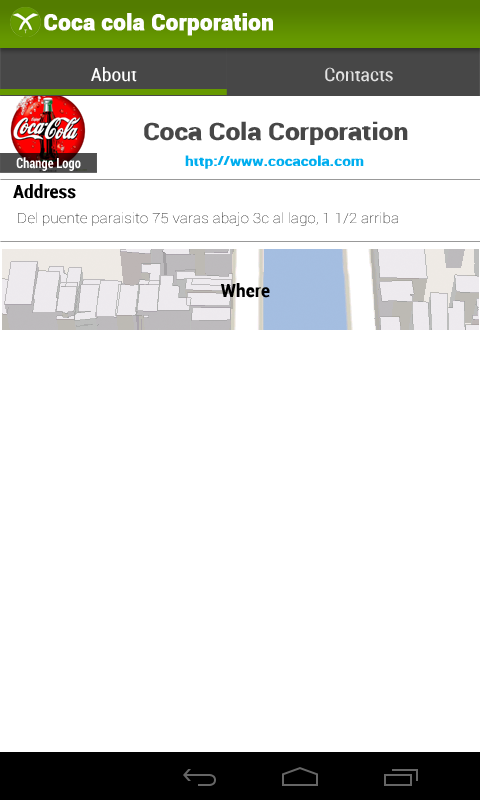
<style>
.page{position:relative;width:480px;height:800px;background:#ffffff}
.page>*{position:absolute;margin:0}
.t1{font:22px "Roboto-Black";color:#fefefe;font-weight:bold}
.t2{font:18px "Roboto-Condensed";color:#ffffff;scale:1.1 1}
.t3{font:18px "Roboto-Condensed";color:#e1e1e1;scale:1.1 1}
.t4{font:24px "Roboto-Black";color:#474747;scale:1.1 1}
.t5{font:14px "Roboto-BoldCondensed";color:#ffffff;scale:0.9 1}
.t6{font:14px "Roboto-Black";color:#00aeef;scale:1.1 1}
.t7{font:18px "Roboto-BoldCondensed";color:#000000;scale:1.1 1}
.t8{font:14px "Roboto-Thin";scale:1.1 1}
</style>
<div class="page">
<p class="t1" style="left:44px;top:13px;width:229px;height:23px">Coca cola Corporation</p>
<p class="t2" style="left:91px;top:67px;width:46px;height:15px">About</p>
<p class="t3" style="left:325px;top:67px;width:68px;height:15px">Contacts</p>
<p class="t4" style="left:144px;top:121px;width:264px;height:24px">Coca Cola Corporation</p>
<p class="t5" style="left:16px;top:157px;width:65px;height:14px">Change Logo</p>
<p class="t6" style="left:185px;top:155px;width:179px;height:14px">http://www.cocacola.com</p>
<p class="t7" style="left:13px;top:184px;width:63px;height:15px">Address</p>
<p class="t8" style="left:18px;top:212px;width:380px;height:14px">Del puente paraisito 75 varas abajo 3c al lago, 1 1/2 arriba</p>
<p class="t7" style="left:221px;top:283px;width:49px;height:15px">Where</p>
</div>
